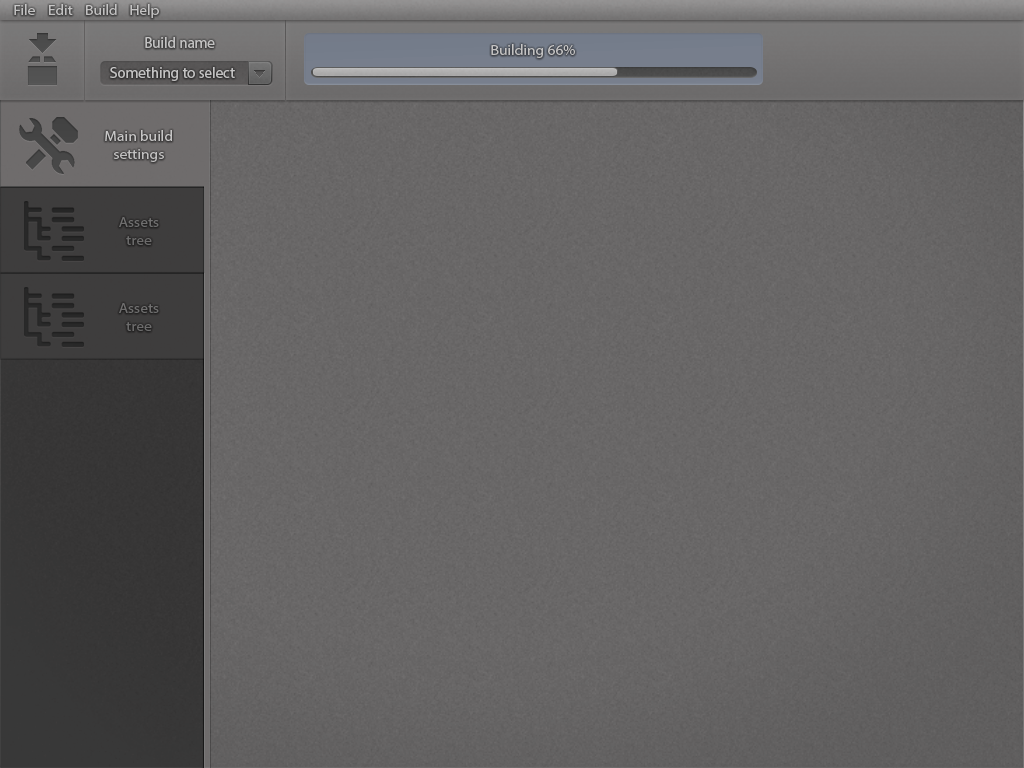
<style>
.page{position:relative;width:1024px;height:768px}
.page>*{position:absolute;margin:0}
.t1{font:14.4px "MyriadPro-Regular";color:#d7d6d6;scale:1.07 1}
.t2{font:15px "MyriadPro-Regular";color:#d7d6d6}
.t3{font:12px "MyriadPro-Regular";color:#3a3a3a}
.t4{font:14.4px "MyriadPro-Regular";color:#6e6e6e;scale:1.07 1}
</style>
<div class="page">
<p class="t1" style="left:14px;top:4px;width:21px;height:11px">File</p>
<p class="t1" style="left:49px;top:4px;width:24px;height:11px">Edit</p>
<p class="t1" style="left:86px;top:4px;width:31px;height:11px">Build</p>
<p class="t1" style="left:130px;top:4px;width:29px;height:14px">Help</p>
<p class="t2" style="left:145px;top:37px;width:70px;height:11px"><span class="t3"><br></span>Build name</p>
<p class="t1" style="left:491px;top:44px;width:84px;height:14px">Building 66%</p>
<p class="t2" style="left:110px;top:67px;width:125px;height:14px"><span class="t3"><br></span>Something to select</p>
<p class="t1" style="left:105px;top:130px;width:67px;height:32px;text-align:center">Main build <br>settings</p>
<p class="t4" style="left:119px;top:217px;width:40px;height:28px;text-align:center">Assets <br>tree</p>
<p class="t4" style="left:119px;top:303px;width:40px;height:28px;text-align:center">Assets <br>tree</p>
</div>
